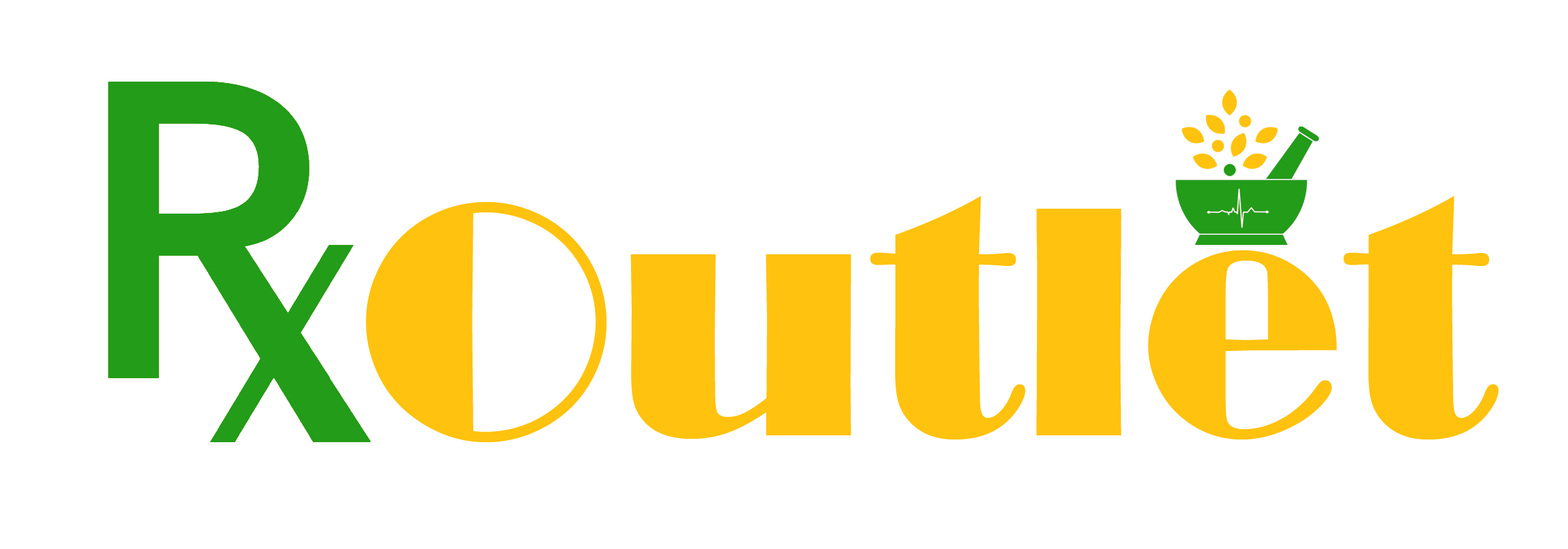
<style>
.page{position:relative;width:1568px;height:549px;background:#ffffff}
.page>*{position:absolute;margin:0}
.t1{font:339.4px "Broadway";color:#ffc20e}
</style>
<div class="page">
<p class="t1" style="left:366px;top:196px;width:1133px;height:246px">Outlet</p>
</div>
